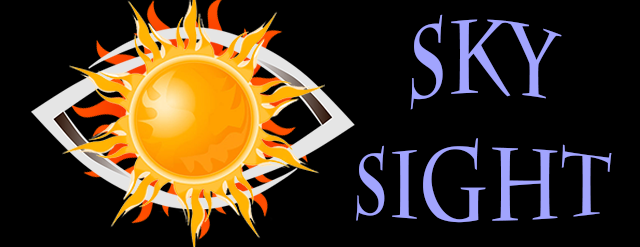
<style>
.page{position:relative;width:640px;height:247px;background:#000000}
.page>*{position:absolute;margin:0}
.t1{font:70.7px "CharlemagneStd-Bold";color:#a1a4fe}
</style>
<div class="page">
<p class="t1" style="left:356px;top:14px;width:256px;height:209px;text-align:center">SKY<br>SIGHT</p>
</div>
